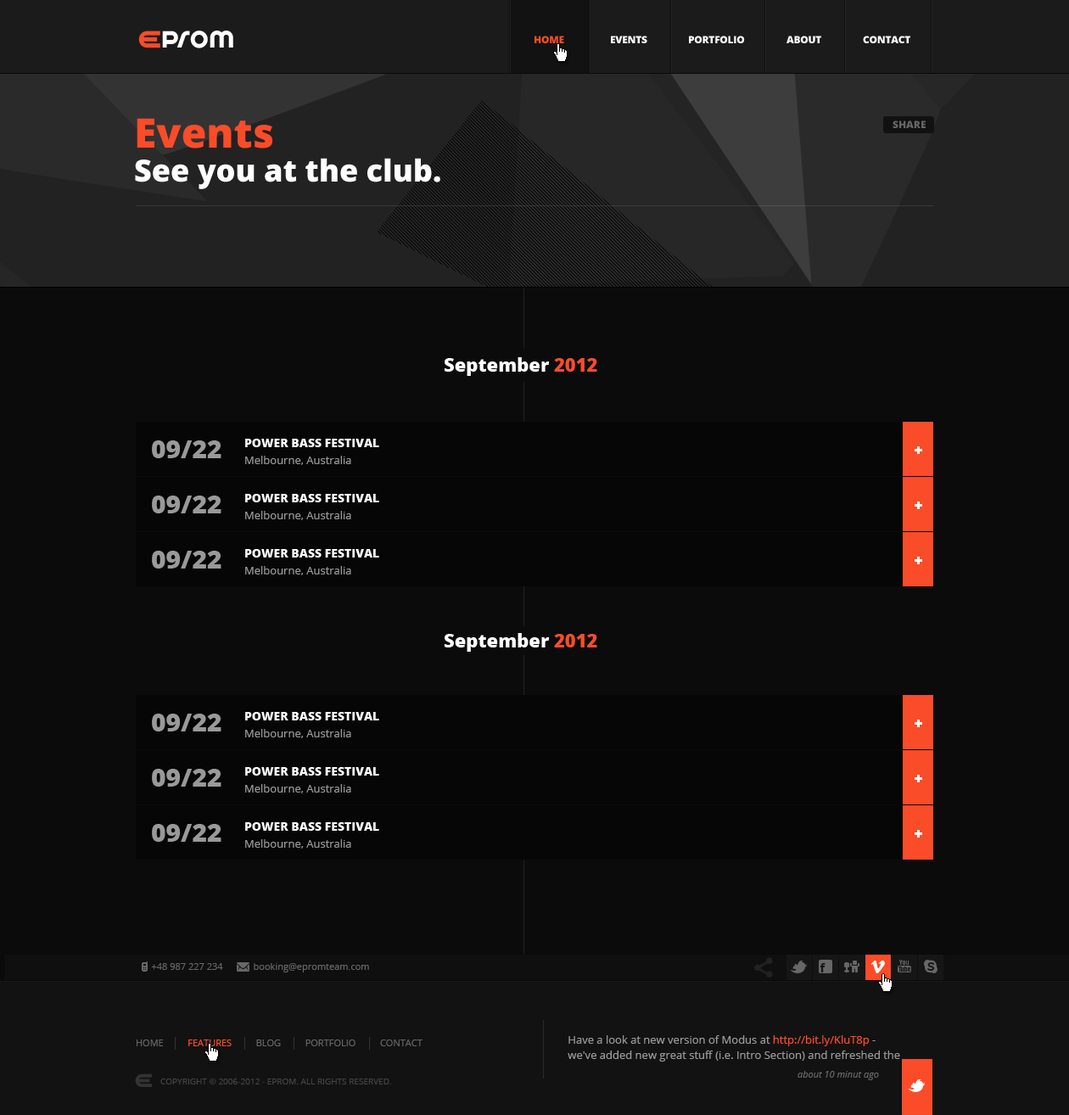
<style>
.page{position:relative;width:1069px;height:1115px;background:#0b0b0b}
.page>*{position:absolute;margin:0}
.t1{font:26.1px "SpinCycleOT";letter-spacing:0.025em;color:#ffffff}
.t2{font:10.2px "OpenSans-Extrabold";letter-spacing:-0.025em;color:#fa4c29;text-transform:uppercase}
.t3{font:10.2px "OpenSans-Extrabold";letter-spacing:-0.025em;color:#ffffff;text-transform:uppercase}
.t4{font:40.7px "OpenSans-Extrabold";color:#fa4c29}
.t5{font:10.2px "OpenSans-Extrabold";color:#666666}
.t6{font:30.6px "OpenSans-Extrabold";color:#ffffff}
.t7{font:18.7px "OpenSans-Extrabold";color:#ffffff}
.t8{font:18.7px "OpenSans-Extrabold";color:#fa4c29}
.t9{font:25.5px "OpenSans-Extrabold";color:#999999}
.t10{font:11.9px "OpenSans-Extrabold";color:#ffffff}
.t11{font:11px "OpenSans";color:#999999}
.t12{font:9.3px "OpenSans";color:#666666}
.t13{font:11px/15.3px "OpenSans";color:#999999}
.t14{font:11px/15.3px "OpenSans";color:#fa4c29}
.t15{font:9.3px "OpenSans";color:#666666;text-transform:uppercase}
.t16{font:9.3px "OpenSans";color:#fa4c29;text-transform:uppercase}
.t17{font:9.3px "OpenSans-Italic";color:#666666}
.t18{font:8.5px "OpenSans";color:#444444;text-transform:uppercase}
</style>
<div class="page">
<p class="t1" style="left:162px;top:31px;width:71px;height:17px">prom</p>
<p class="t2" style="left:535px;top:36px;width:29px;height:7px">Home</p>
<p class="t3" style="left:611px;top:36px;width:37px;height:7px">EVENTS</p>
<p class="t3" style="left:689px;top:36px;width:56px;height:7px">PORTFOLIO</p>
<p class="t3" style="left:787px;top:36px;width:35px;height:7px">ABOUT</p>
<p class="t3" style="left:863px;top:36px;width:48px;height:7px">Contact</p>
<p class="t4" style="left:137px;top:118px;width:135px;height:31px">Events</p>
<p class="t5" style="left:893px;top:121px;width:33px;height:7px">SHARE</p>
<p class="t6" style="left:135px;top:158px;width:305px;height:31px">See you at the club.</p>
<p class="t7" style="left:445px;top:357px;width:152px;height:19px">September <span class="t8">2012</span></p>
<p class="t9" style="left:152px;top:440px;width:70px;height:18px">09/22</p>
<p class="t10" style="left:245px;top:439px;width:134px;height:8px">POWER BASS FESTIVAL</p>
<p class="t11" style="left:245px;top:456px;width:106px;height:9px">Melbourne, Australia</p>
<p class="t9" style="left:152px;top:496px;width:70px;height:17px">09/22</p>
<p class="t10" style="left:245px;top:494px;width:134px;height:8px">POWER BASS FESTIVAL</p>
<p class="t11" style="left:245px;top:511px;width:106px;height:9px">Melbourne, Australia</p>
<p class="t9" style="left:152px;top:551px;width:70px;height:18px">09/22</p>
<p class="t10" style="left:245px;top:549px;width:134px;height:9px">POWER BASS FESTIVAL</p>
<p class="t11" style="left:245px;top:566px;width:106px;height:9px">Melbourne, Australia</p>
<p class="t7" style="left:445px;top:633px;width:152px;height:19px">September <span class="t8">2012</span></p>
<p class="t9" style="left:152px;top:714px;width:70px;height:18px">09/22</p>
<p class="t10" style="left:245px;top:712px;width:134px;height:9px">POWER BASS FESTIVAL</p>
<p class="t11" style="left:245px;top:729px;width:106px;height:9px">Melbourne, Australia</p>
<p class="t9" style="left:152px;top:769px;width:70px;height:18px">09/22</p>
<p class="t10" style="left:245px;top:767px;width:134px;height:9px">POWER BASS FESTIVAL</p>
<p class="t11" style="left:245px;top:784px;width:106px;height:9px">Melbourne, Australia</p>
<p class="t9" style="left:152px;top:824px;width:70px;height:18px">09/22</p>
<p class="t10" style="left:245px;top:822px;width:134px;height:9px">POWER BASS FESTIVAL</p>
<p class="t11" style="left:245px;top:839px;width:106px;height:10px">Melbourne, Australia</p>
<p class="t12" style="left:151px;top:963px;width:72px;height:7px">+48 987 227 234</p>
<p class="t12" style="left:254px;top:963px;width:115px;height:10px">booking@epromteam.com</p>
<p class="t13" style="left:568px;top:1035px;width:332px;height:27px">Have a look at new version of Modus at <span class="t14">http://bit.ly/KluT8p</span> - we've added new great stuff (i.e. Intro Section) and refreshed the theme!</p>
<p class="t15" style="left:137px;top:1040px;width:286px;height:6px">Home          <span class="t16">Features </span>         Blog          Portfolio          Contact</p>
<p class="t17" style="left:798px;top:1071px;width:81px;height:9px">about 10 minut ago</p>
<p class="t18" style="left:160px;top:1079px;width:231px;height:6px">Copyright © 2006-2012 - EPROM. All rights reserved.</p>
</div>
